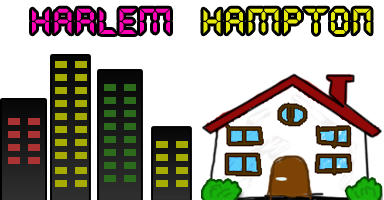
<style>
.page{position:relative;width:384px;height:200px;background:#ffffff}
.page>*{position:absolute;margin:0}
.t1{font:36px "QuartzMS";color:#ff00b4}
.t2{font:36px "QuartzMS";color:#e5e80b}
</style>
<div class="page">
<p class="t1" style="left:32px;top:8px;width:138px;height:26px">Harlem</p>
<p class="t2" style="left:203px;top:8px;width:168px;height:26px">HAMPTON</p>
</div>
